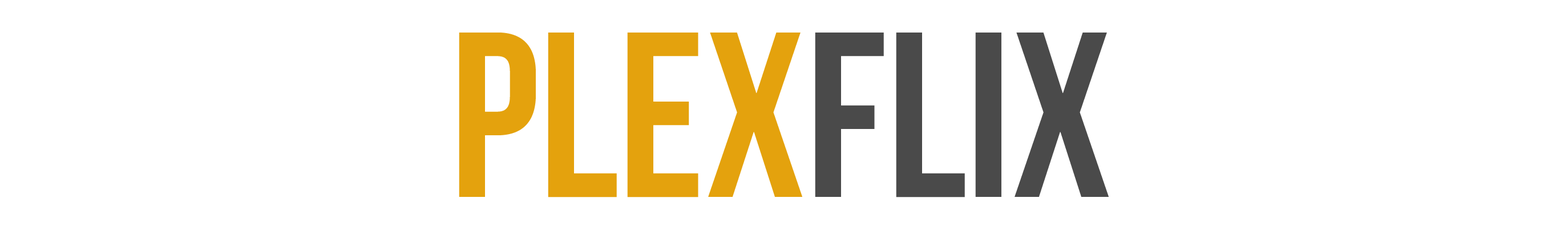
<style>
.page{position:relative;width:1568px;height:230px;background:#ffffff}
.page>*{position:absolute;margin:0}
.t1{font:235.1px "BebasNeue";color:#e4a20d}
.t2{font:235.1px "BebasNeue";color:#4a4a4a}
</style>
<div class="page">
<p class="t1" style="left:459px;top:33px;width:650px;height:164px">Plex<span class="t2">flix</span></p>
</div>
